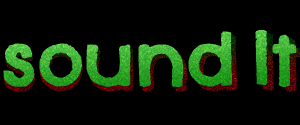
<style>
.page{position:relative;width:300px;height:125px;background:#000000}
.page>*{position:absolute;margin:0}
.t1{font:72px "Xenophone";letter-spacing:0.025em;font-weight:bold}
</style>
<div class="page">
<p class="t1" style="left:3px;top:30px;width:294px;height:57px">sound lt</p>
</div>
